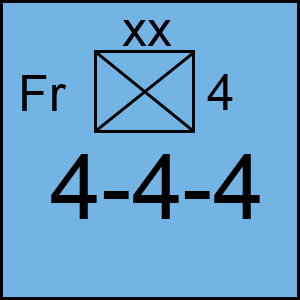
<style>
.page{position:relative;width:300px;height:300px;background:#74b4e4}
.page>*{position:absolute;margin:0}
.t1{font:50px "ArialMT";color:#000000}
.t2{font:91.7px "ArialMT";color:#000000}
</style>
<div class="page">
<p class="t1" style="left:122px;top:20px;width:50px;height:26px">xx</p>
<p class="t1" style="left:22px;top:75px;width:44px;height:36px">Fr</p>
<p class="t1" style="left:207px;top:74px;width:26px;height:36px">4</p>
<p class="t2" style="left:51px;top:154px;width:209px;height:65px">4-4-4</p>
</div>
